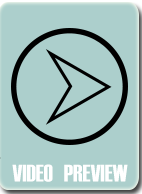
<style>
.page{position:relative;width:142px;height:194px;background:#accfcc}
.page>*{position:absolute;margin:0}
.t1{font:24px "Haettenschweiler";color:#ffffff}
</style>
<div class="page">
<p class="t1" style="left:12px;top:164px;width:41px;height:18px">VIDEO</p>
<p class="t1" style="left:64px;top:164px;width:64px;height:18px">PREVIEW</p>
</div>
